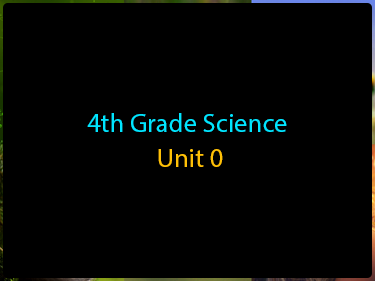
<style>
.page{position:relative;width:375px;height:281px;background:#000000}
.page>*{position:absolute;margin:0}
.t1{font:26.7px "MyriadPro-Regular";color:#00e5ff}
.t2{font:26.7px "MyriadPro-Regular";color:#ffc107}
</style>
<div class="page">
<p class="t1" style="left:87px;top:113px;width:200px;height:19px">4th Grade Science</p>
<p class="t2" style="left:158px;top:149px;width:65px;height:18px">Unit 0</p>
</div>
